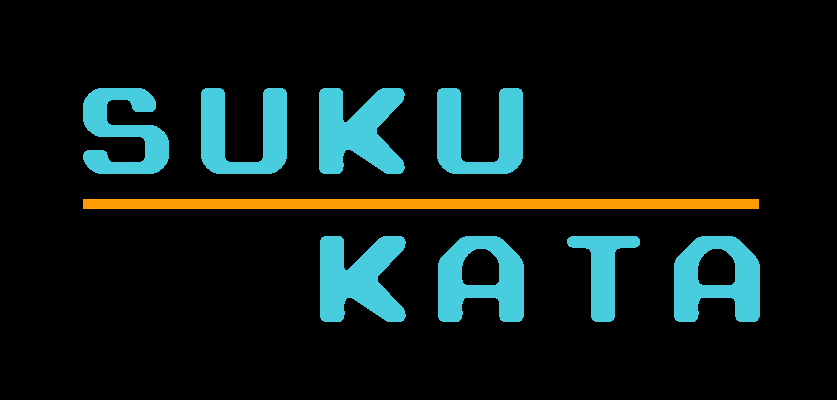
<style>
.page{position:relative;width:837px;height:400px;background:#000000}
.page>*{position:absolute;margin:0}
.t1{font:100px "ArcadeRounded";letter-spacing:0.2em;color:#48cdde}
</style>
<div class="page">
<p class="t1" style="left:83px;top:88px;width:440px;height:86px">SUKU</p>
<p class="t1" style="left:320px;top:236px;width:440px;height:86px">KATA</p>
</div>
